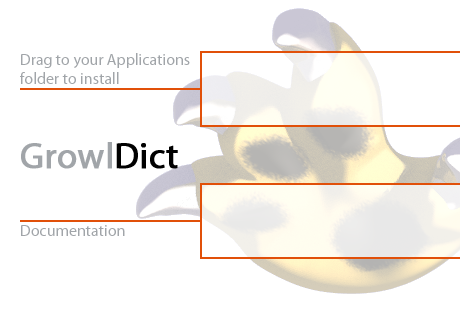
<style>
.page{position:relative;width:460px;height:310px;background:#ffffff}
.page>*{position:absolute;margin:0}
.t1{font:16px "Myriad-Roman";color:#a1a5a9}
.t2{font:36px "Myriad-Roman";color:#a1a5a9;font-weight:bold}
.t3{font:36px "Myriad-Roman";color:#000000;font-weight:bold}
</style>
<div class="page">
<p class="t1" style="left:20px;top:53px;width:170px;height:31px">Drag to your Applications<br>folder to install</p>
<p class="t2" style="left:21px;top:142px;width:157px;height:27px">Growl<span class="t3">Dict</span></p>
<p class="t1" style="left:21px;top:225px;width:104px;height:11px">Documentation</p>
</div>
